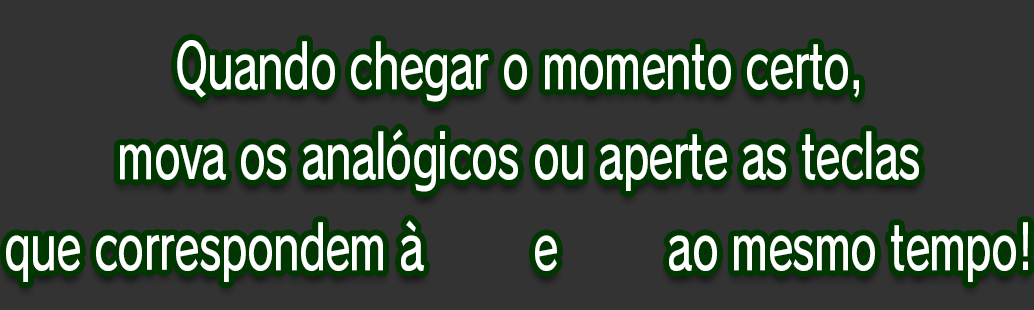
<style>
.page{position:relative;width:1034px;height:310px;background:#333333}
.page>*{position:absolute;margin:0}
.t1{font:61.3px/90.7px "RodinPro-DB";letter-spacing:-0.022em;color:#ffffff;scale:0.69 1}
</style>
<div class="page">
<p class="t1" style="left:6px;top:40px;width:1022px;height:242px;text-align:center">Quando chegar o momento certo,<br>mova os analógicos ou aperte as teclas<br>que correspondem à        e        ao mesmo tempo!</p>
</div>
